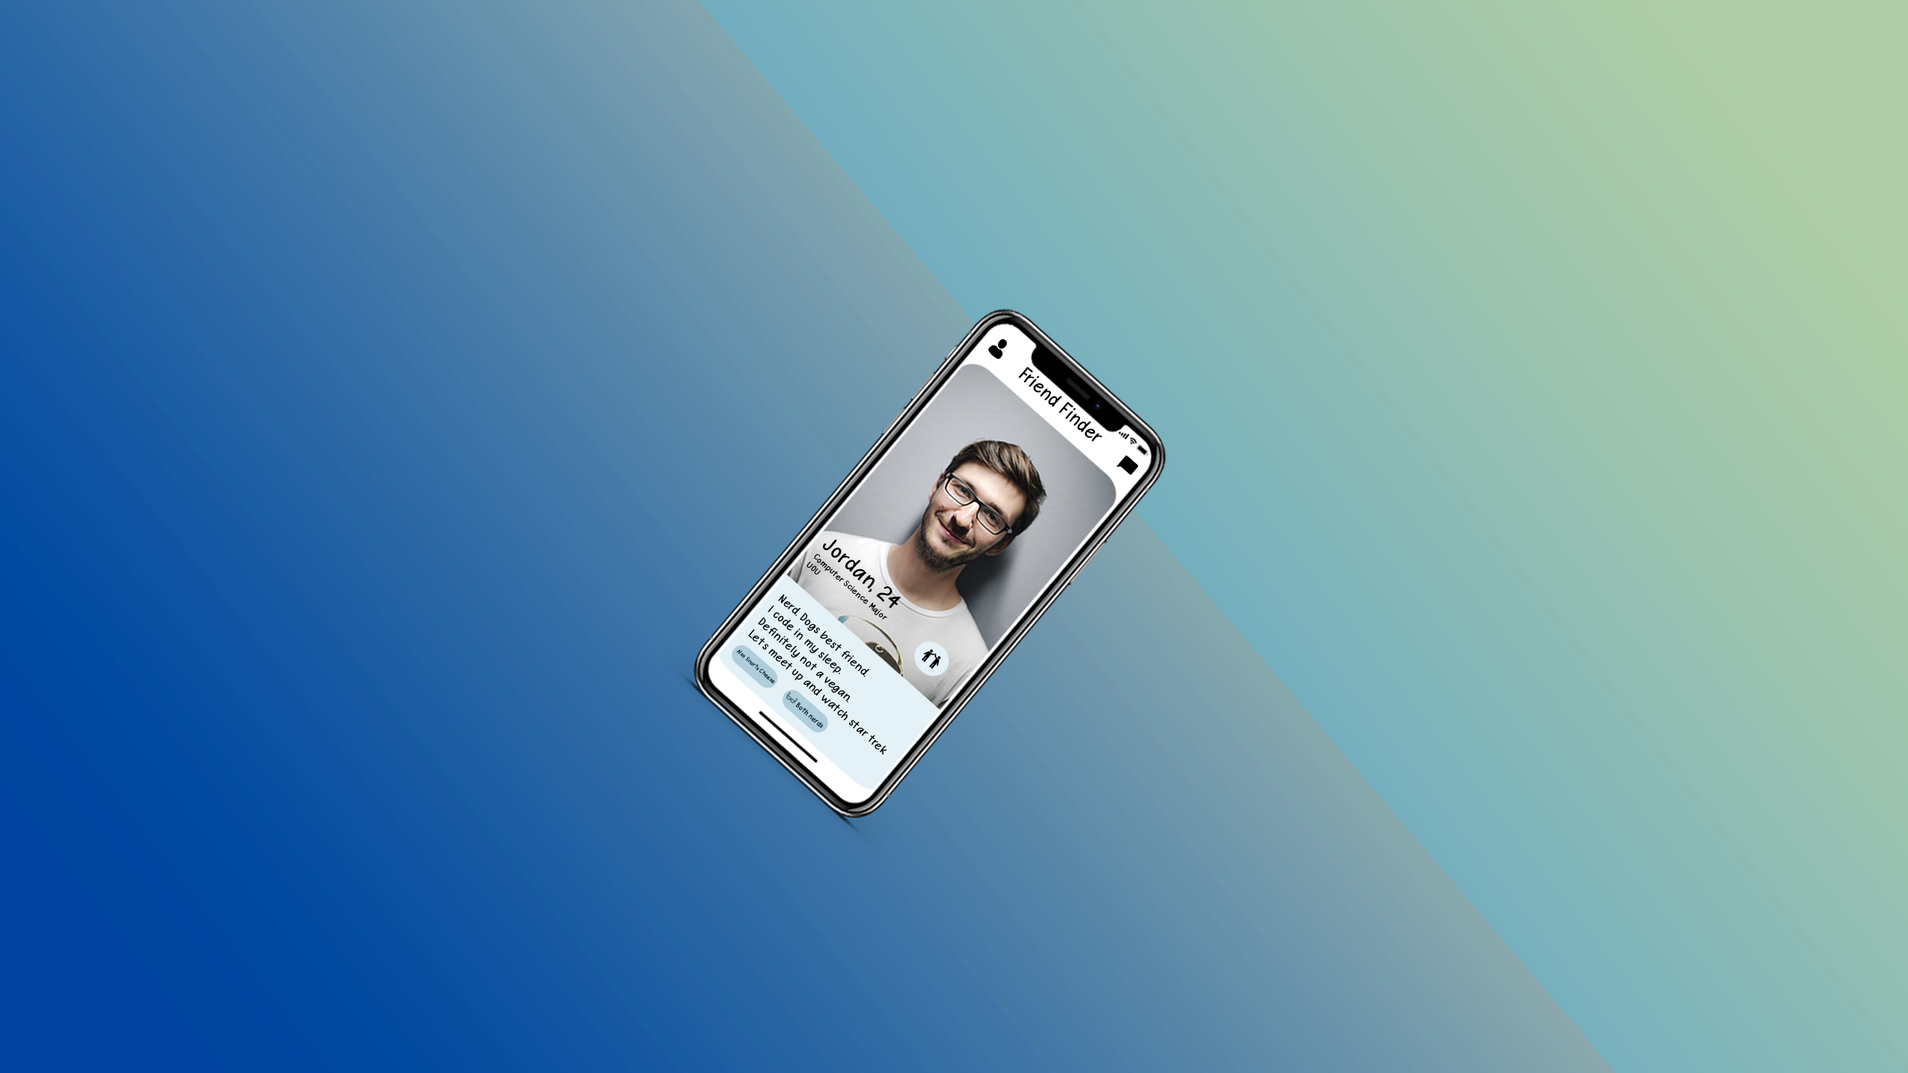
<style>
.page{position:relative;width:1908px;height:1073px}
.page>*{position:absolute;margin:0}
.t1{font:23.1px "VanillaTwilight";color:#000000;scale:1.07 1}
.t2{font:9px "VanillaTwilight";color:#000000;scale:1.17 1}
.t3{font:12.8px "VanillaTwilight";color:#000000;scale:1.07 1}
.t4{font:6.4px "VanillaTwilight";color:#10252e;scale:1.09 1}
.t5{font:7.6px "VanillaTwilight";color:#10252e;scale:1.09 1}
</style>
<div class="page">
<p class="t1" style="left:823px;top:540px;width:78px;height:68px;rotate:41deg">Jordan, 24</p>
<p class="t2" style="left:806px;top:554px;width:82px;height:66px;rotate:41deg">Computer Science Major<br>UOU</p>
<p class="t3" style="left:748px;top:594px;width:139px;height:161px;rotate:41deg">Nerd. Dogs best friend.<br>I code in my sleep.<br>Definitely not a vegan.<br>Let’s meet up and watch star trek</p>
<p class="t4" style="left:736px;top:649px;width:39px;height:35px;rotate:42deg">Also Snorts Cheese</p>
<p class="t5" style="left:795px;top:702px;width:29px;height:26px;rotate:41deg">Both nerds</p>
</div>
